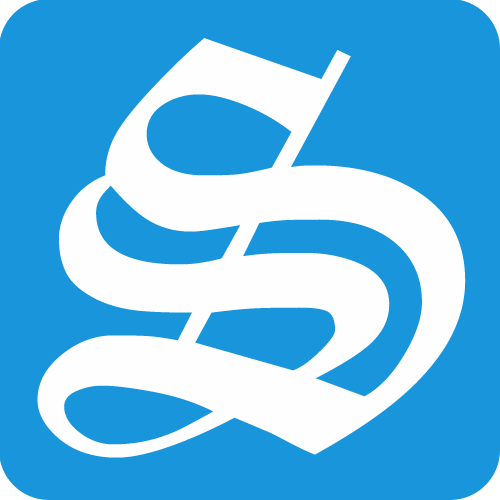
<style>
.page{position:relative;width:500px;height:500px;background:#1995dc}
.page>*{position:absolute;margin:0}
.t1{font:550px "Diploma";color:#fefefe}
</style>
<div class="page">
<p class="t1" style="left:37px;top:38px;width:429px;height:420px">S</p>
</div>
